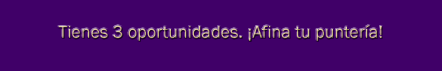
<style>
.page{position:relative;width:442px;height:71px;background:#400068}
.page>*{position:absolute;margin:0}
.t1{font:18px "FranklinGothic-Book";color:#d4c088}
</style>
<div class="page">
<p class="t1" style="left:58px;top:25px;width:324px;height:16px">Tienes 3 oportunidades. ¡Afina tu puntería!</p>
</div>
